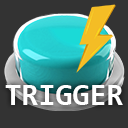
<style>
.page{position:relative;width:128px;height:128px;background:#333333}
.page>*{position:absolute;margin:0}
.t1{font:30.9px "Consolas-Bold";color:#ffffff}
</style>
<div class="page">
<p class="t1" style="left:5px;top:85px;width:118px;height:20px">TRIGGER</p>
</div>
